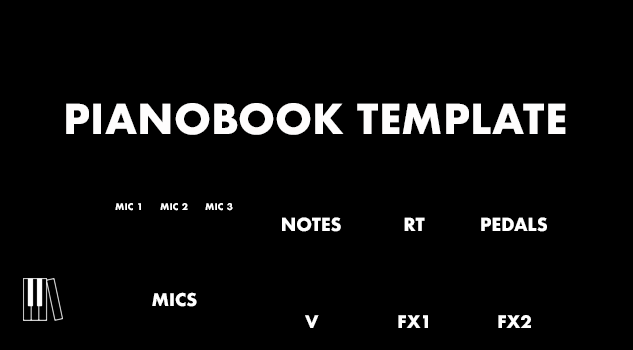
<style>
.page{position:relative;width:633px;height:350px;background:#000000}
.page>*{position:absolute;margin:0}
.t1{font:40px "Futura-Bold";color:#fefdfd;text-transform:uppercase}
.t2{font:9.1px "Futura-Bold";color:#ffffff;text-transform:uppercase}
.t3{font:17.6px "Futura-Bold";color:#ffffff;text-transform:uppercase;scale:0.97 1}
.t4{font:17px "Futura-Bold";color:#ffffff;text-transform:uppercase}
.t5{font:16.8px "Futura-Bold";color:#ffffff;text-transform:uppercase}
</style>
<div class="page">
<p class="t1" style="left:66px;top:103px;width:500px;height:32px">Pianobook Template</p>
<p class="t2" style="left:115px;top:203px;width:26px;height:8px">MIC 1</p>
<p class="t2" style="left:160px;top:203px;width:28px;height:8px">MIC 2</p>
<p class="t2" style="left:205px;top:203px;width:28px;height:8px">MIC 3</p>
<p class="t3" style="left:282px;top:217px;width:59px;height:15px">NOTES</p>
<p class="t3" style="left:404px;top:217px;width:21px;height:14px">RT</p>
<p class="t3" style="left:481px;top:217px;width:66px;height:15px">PEDALS</p>
<p class="t4" style="left:152px;top:292px;width:45px;height:15px">MICS</p>
<p class="t5" style="left:305px;top:315px;width:14px;height:13px">V</p>
<p class="t5" style="left:398px;top:315px;width:30px;height:13px">FX1</p>
<p class="t5" style="left:498px;top:315px;width:33px;height:13px">FX2</p>
</div>
